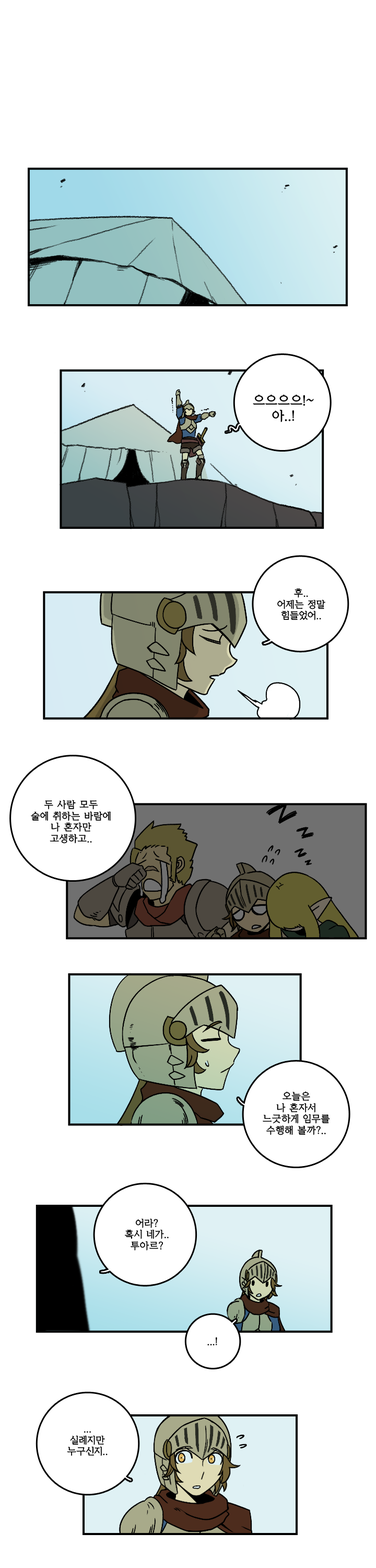
<style>
.page{position:relative;width:376px;height:1568px;background:#ffffff}
.page>*{position:absolute;margin:0}
.t1{font:12.5px "KoreanYMJ-E";color:#000000}
.t2{font:9.4px "KoreanYMJ-E";color:#000000}
</style>
<div class="page">
<p class="t1" style="left:253px;top:395px;width:61px;height:27px;text-align:center">으으으으!~<br>아..!</p>
<p class="t2" style="left:278px;top:588px;width:48px;height:32px;text-align:center">후..<br>어제는 정말<br>힘들었어..</p>
<p class="t2" style="left:31px;top:800px;width:80px;height:44px;text-align:center">두 사람 모두<br>술에 취하는 바람에<br>나 혼자만<br>고생하고..</p>
<p class="t2" style="left:263px;top:1091px;width:67px;height:44px;text-align:center">오늘은<br>나 혼자서<br>느긋하게 임무를<br>수행해 볼까?..</p>
<p class="t2" style="left:125px;top:1218px;width:44px;height:33px;text-align:center">어라?<br>혹시 네가..<br>투아르?</p>
<p class="t2" style="left:207px;top:1337px;width:10px;height:8px">...!</p>
<p class="t2" style="left:67px;top:1431px;width:41px;height:25px;text-align:center">...<br>실례지만<br>누구신지..</p>
</div>
